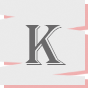
<style>
.page{position:relative;width:91px;height:91px;background:#eaeaea}
.page>*{position:absolute;margin:0}
.t1{font:60px "Algerian";color:#6a696a}
</style>
<div class="page">
<p class="t1" style="left:25px;top:25px;width:41px;height:40px">K</p>
</div>
